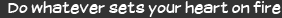
<style>
.page{position:relative;width:282px;height:18px;background:#333333}
.page>*{position:absolute;margin:0}
.t1{font:16px "SuplexmentaryComicNC";color:#ffffff}
</style>
<div class="page">
<p class="t1" style="left:8px;top:1px;width:273px;height:16px">Do whatever sets your heart on fire</p>
</div>
